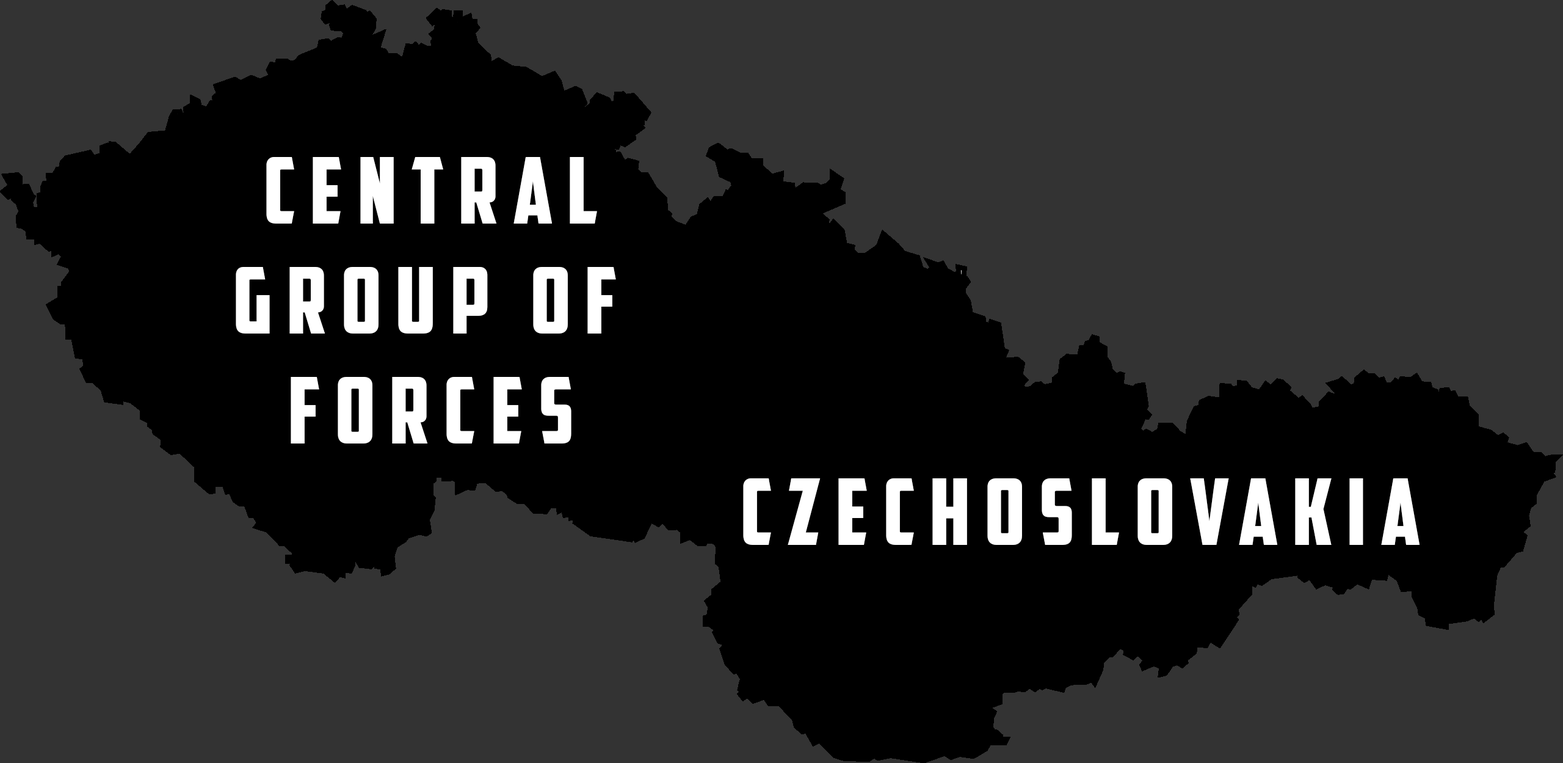
<style>
.page{position:relative;width:1563px;height:763px;background:#333333}
.page>*{position:absolute;margin:0}
.t1{font:91.6px "AmericanCaptain";letter-spacing:0.16em;color:#ffffff}
</style>
<div class="page">
<p class="t1" style="left:236px;top:157px;width:380px;height:286px;text-align:center">Central<br>Group of <br>Forces</p>
<p class="t1" style="left:743px;top:478px;width:677px;height:67px">Czechoslovakia</p>
</div>
